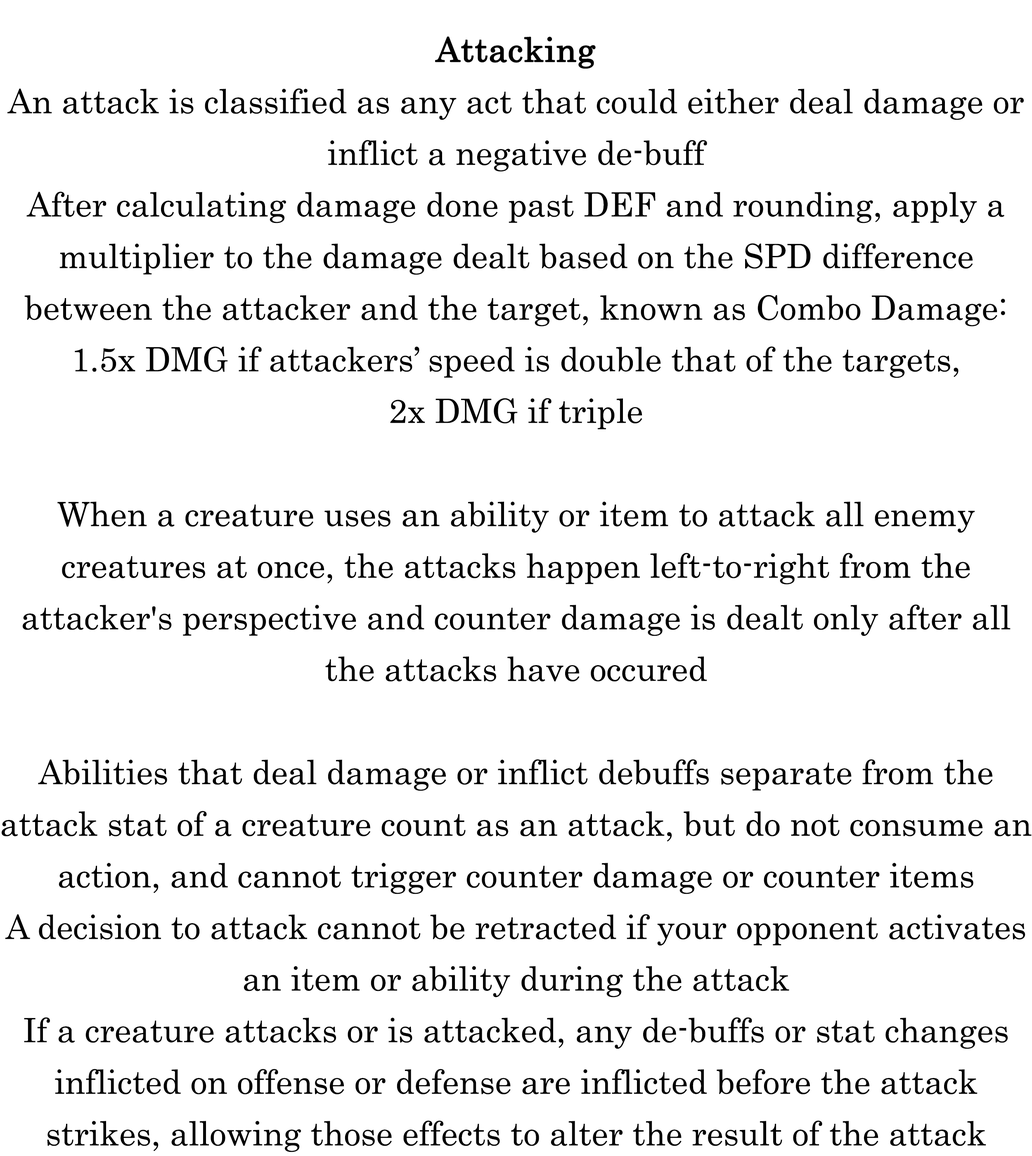
<style>
.page{position:relative;width:1032px;height:1156px;background:#ffffff}
.page>*{position:absolute;margin:0}
.t1{font:57.3px/51.6px "Century";color:#000000}
.t2{font:57.3px/51.6px "Century";color:#000000;font-weight:bold}
</style>
<div class="page">
<p class="t1" style="left:2px;top:36px;width:1029px;height:1116px;text-align:center"><span class="t2">Attacking<br></span>An attack is classified as any act that could either deal damage or inflict a negative de-buff<br>After calculating damage done past DEF and rounding, apply a multiplier to the damage dealt based on the SPD difference between the attacker and the target, known as Combo Damage:<br>1.5x DMG if attackers’ speed is double that of the targets,<br>2x DMG if triple<br><br>When a creature uses an ability or item to attack all enemy creatures at once, the attacks happen left-to-right from the attacker's perspective and counter damage is dealt only after all the attacks have occured<br><br>Abilities that deal damage or inflict debuffs separate from the attack stat of a creature count as an attack, but do not consume an action, and cannot trigger counter damage or counter items<br>A decision to attack cannot be retracted if your opponent activates an item or ability during the attack<br>If a creature attacks or is attacked, any de-buffs or stat changes inflicted on offense or defense are inflicted before the attack strikes, allowing those effects to alter the result of the attack</p>
</div>
